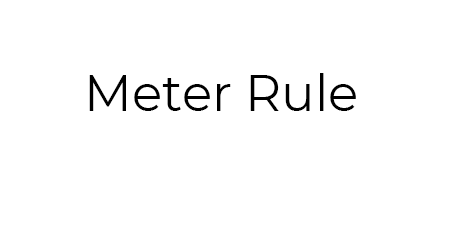
<style>
.page{position:relative;width:455px;height:238px;background:#ffffff}
.page>*{position:absolute;margin:0}
.t1{font:50px "Montserrat-Regular";color:#000000}
</style>
<div class="page">
<p class="t1" style="left:89px;top:73px;width:267px;height:38px">Meter Rule</p>
</div>
